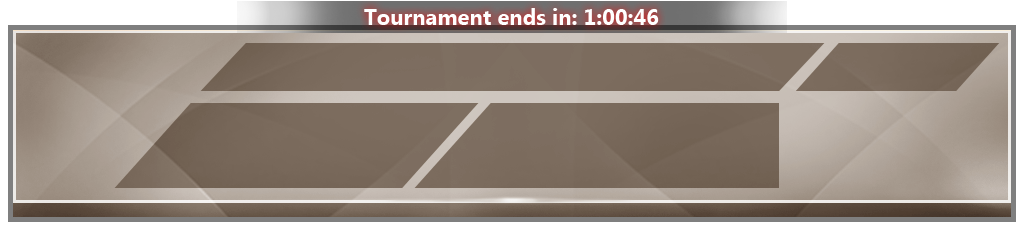
<style>
.page{position:relative;width:1024px;height:233px}
.page>*{position:absolute;margin:0}
.t1{font:22px "MicrosoftTaiLe-Bold";color:#ffffff}
</style>
<div class="page">
<p class="t1" style="left:364px;top:8px;width:295px;height:17px">Tournament ends in: 1:00:46</p>
</div>
